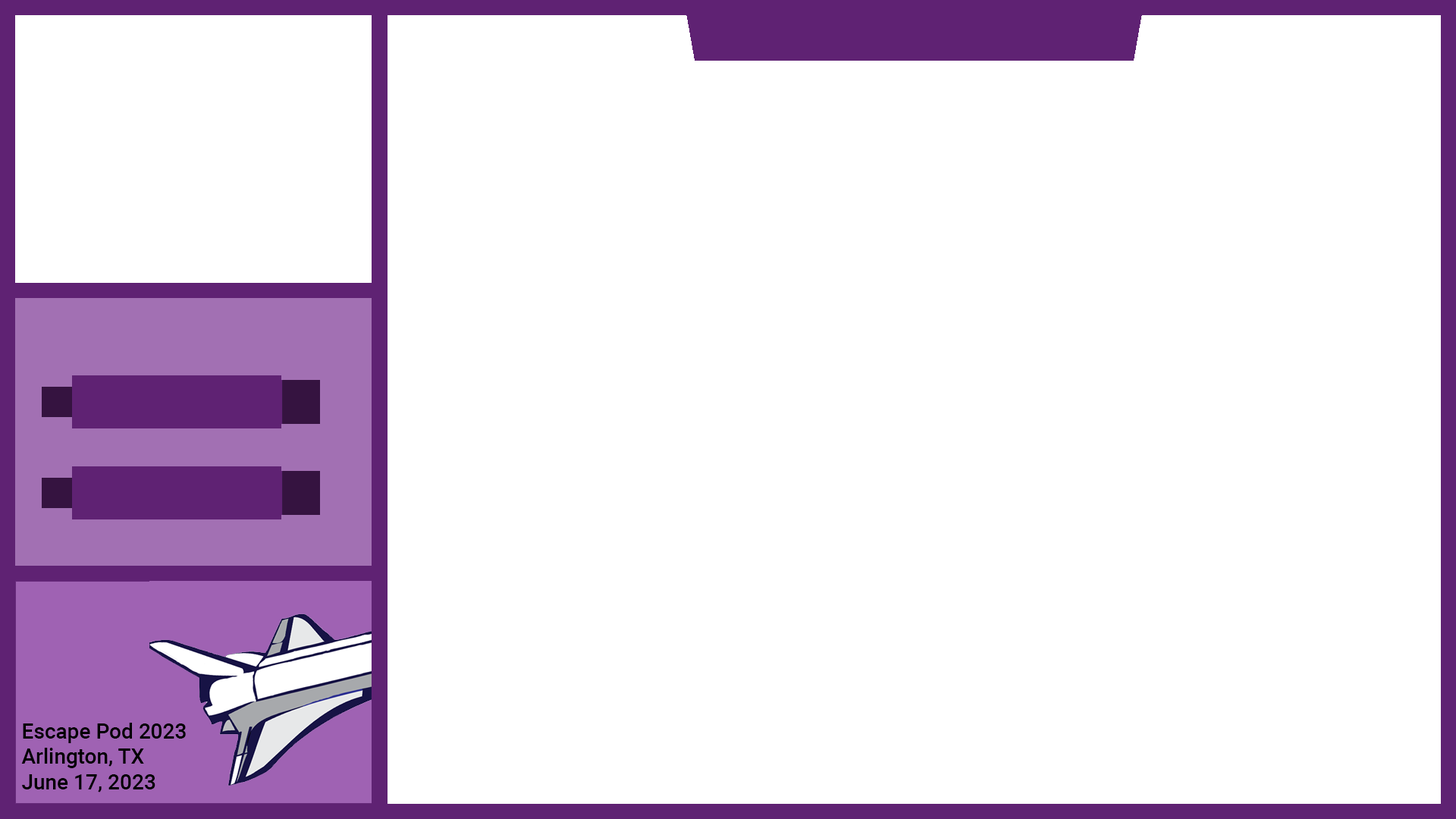
<style>
.page{position:relative;width:1456px;height:819px;background:#ffffff}
.page>*{position:absolute;margin:0}
.t1{font:21.2px "Roboto-Medium";color:#000000}
</style>
<div class="page">
<p class="t1" style="left:21px;top:723px;width:165px;height:69px">Escape Pod 2023<br>Arlington, TX<br>June 17, 2023</p>
</div>
